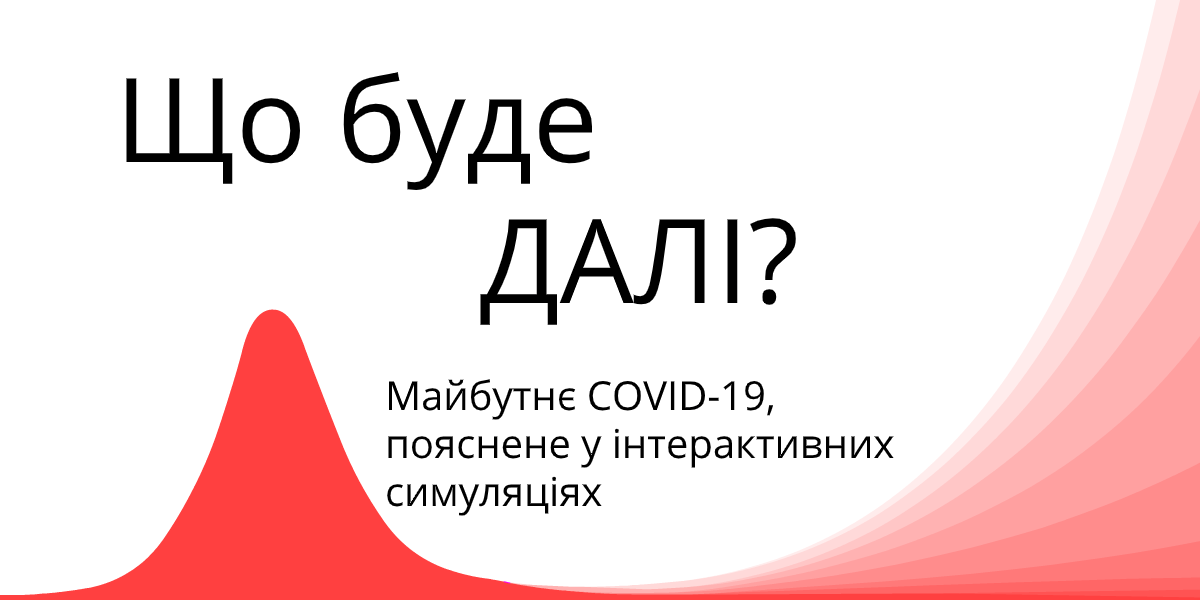
<style>
.page{position:relative;width:1200px;height:600px;background:#ffffff}
.page>*{position:absolute;margin:0}
.t1{font:117px "OpenSans-Regular";color:#000000}
.t2{font:40px "OpenSans-Regular";color:#000000}
</style>
<div class="page">
<p class="t1" style="left:126px;top:72px;width:670px;height:253px">Що буде <br>            ДАЛІ?</p>
<p class="t2" style="left:387px;top:379px;width:507px;height:137px">Майбутнє COVID-19, <br>пояснене у інтерактивних <br>симуляціях</p>
</div>
